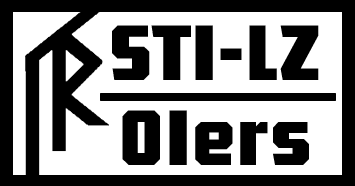
<style>
.page{position:relative;width:355px;height:186px;background:#ffffff}
.page>*{position:absolute;margin:0}
.t1{font:75px "FZGONGYHJW--GB1-0";color:#000000}
.t2{font:75px "FZGONGYHJW--GB1-0";letter-spacing:0.05em;color:#000000}
</style>
<div class="page">
<p class="t1" style="left:112px;top:25px;width:207px;height:55px">STI-LZ</p>
<p class="t2" style="left:122px;top:110px;width:187px;height:55px">OIers</p>
</div>
